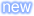
<style>
.page{position:relative;width:34px;height:16px}
.page>*{position:absolute;margin:0}
.t1{font:16px "ArialMT";color:#ffffff}
</style>
<div class="page">
<p class="t1" style="left:3px;top:3px;width:28px;height:10px">new</p>
</div>
